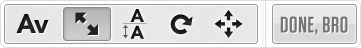
<style>
.page{position:relative;width:361px;height:48px}
.page>*{position:absolute;margin:0}
.t1{font:26.2px "AvenirLTStd-Black";color:#333333}
.t2{font:18.3px/16.8px "AvenirLTStd-Black";color:#1b1b1b}
.t3{font:22.6px "Tungsten-Semibold";letter-spacing:0.025em;color:#757575;text-transform:uppercase}
</style>
<div class="page">
<p class="t1" style="left:16px;top:14px;width:33px;height:19px">Av</p>
<p class="t2" style="left:130px;top:9px;width:14px;height:30px">A<br>A</p>
<p class="t3" style="left:280px;top:16px;width:68px;height:19px">done, bro</p>
</div>
